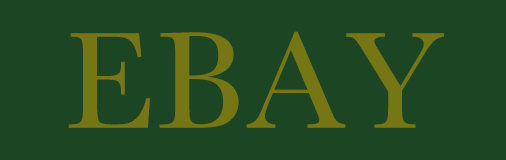
<style>
.page{position:relative;width:506px;height:160px;background:#1b4523}
.page>*{position:absolute;margin:0}
.t1{font:142.6px "Baskerville";letter-spacing:0.014em;color:#767615;text-transform:uppercase}
</style>
<div class="page">
<p class="t1" style="left:68px;top:31px;width:376px;height:97px">EBAY</p>
</div>
